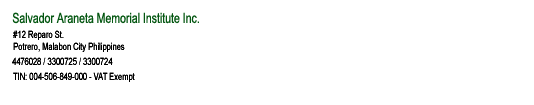
<style>
.page{position:relative;width:534px;height:105px;background:#ffffff}
.page>*{position:absolute;margin:0}
.t1{font:14px "ArialMT";color:#055712;scale:0.75 1}
.t2{font:10px "ArialMT";color:#000000;scale:0.75 1}
</style>
<div class="page">
<p class="t1" style="left:12px;top:12px;width:187px;height:12px">Salvador Araneta Memorial Institute Inc.</p>
<p class="t2" style="left:13px;top:30px;width:112px;height:22px">#12 Reparo St.<br>Potrero, Malabon City Philippines</p>
<p class="t2" style="left:12px;top:57px;width:101px;height:8px">4476028 / 3300725 / 3300724</p>
<p class="t2" style="left:13px;top:72px;width:122px;height:10px">TIN: 004-506-849-000 - VAT Exempt</p>
</div>
